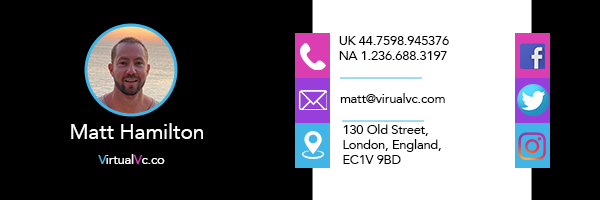
<style>
.page{position:relative;width:600px;height:200px;background:#000000}
.page>*{position:absolute;margin:0}
.t1{font:12.5px "Avenir-Roman";color:#000000}
.t2{font:20.8px "Avenir-Roman";color:#fefefe}
.t3{font:12.5px "Avenir-Roman";color:#ffffff}
.t4{font:12.5px "Avenir-Roman";color:#41b6e6}
.t5{font:12.5px "Avenir-Roman";color:#db3eb1}
</style>
<div class="page">
<p class="t1" style="left:339px;top:36px;width:110px;height:24px">UK 44.7598.945376<br>NA 1.236.688.3197</p>
<p class="t1" style="left:340px;top:93px;width:105px;height:10px">matt@virualvc.com</p>
<p class="t2" style="left:71px;top:123px;width:132px;height:16px">Matt Hamilton</p>
<p class="t1" style="left:343px;top:124px;width:98px;height:40px">130 Old Street, <br>London, England, <br>EC1V 9BD</p>
<p class="t3" style="left:98px;top:154px;width:67px;height:10px"><span class="t4">V</span>irtual<span class="t5">V</span>c.co</p>
</div>
